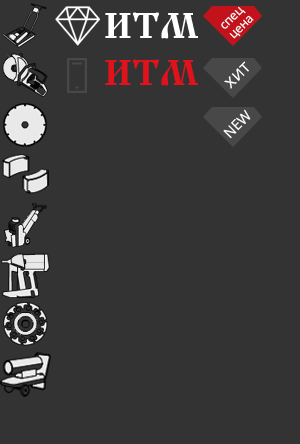
<style>
.page{position:relative;width:300px;height:444px;background:#333333}
.page>*{position:absolute;margin:0}
.t1{font:12px/3px "OpenSans";letter-spacing:0.01em;color:#ffffff}
.t2{font:36px "IzhitsaCyrillic";letter-spacing:0.01em;color:#ffffff}
.t3{font:36px "IzhitsaCyrillic";letter-spacing:0.01em;color:#e2121d}
.t4{font:18px "OpenSans";letter-spacing:0.01em;color:#ffffff}
.t5{font:14px "OpenSans";letter-spacing:0.01em;color:#ffffff}
</style>
<div class="page">
<p class="t1" style="left:221px;top:6px;width:33px;height:33px;text-align:justify;rotate:-45deg">спец<br>цена</p>
<p class="t2" style="left:105px;top:12px;width:93px;height:27px">ИТМ</p>
<p class="t3" style="left:105px;top:59px;width:93px;height:27px">ИТМ</p>
<p class="t4" style="left:224px;top:61px;width:25px;height:28px;rotate:-45deg">хит</p>
<p class="t5" style="left:223px;top:109px;width:28px;height:30px;rotate:-45deg">NEW</p>
</div>
